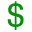
<style>
.page{position:relative;width:32px;height:32px;background:#ffffff}
.page>*{position:absolute;margin:0}
.t1{font:32px "Helvetica";color:#118a11}
</style>
<div class="page">
<p class="t1" style="left:7px;top:1px;width:17px;height:29px">$</p>
</div>
